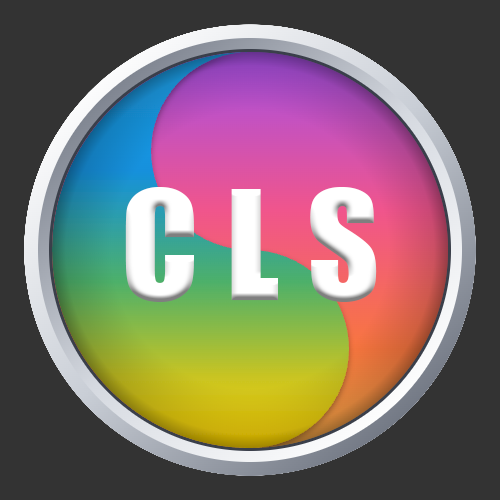
<style>
.page{position:relative;width:500px;height:500px;background:#333333}
.page>*{position:absolute;margin:0}
.t1{font:140px "Impact";letter-spacing:0.2em;color:#ffffff}
</style>
<div class="page">
<p class="t1" style="left:125px;top:187px;width:252px;height:115px">CLS</p>
</div>
